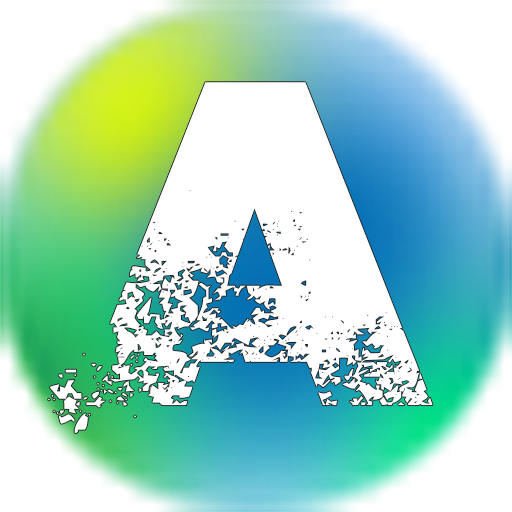
<style>
.page{position:relative;width:512px;height:512px;background:#ffffff}
.page>*{position:absolute;margin:0}
.t1{font:424.3px "C.A.Gatintas";color:#ffffff}
</style>
<div class="page">
<p class="t1" style="left:48px;top:82px;width:385px;height:351px">A</p>
</div>
